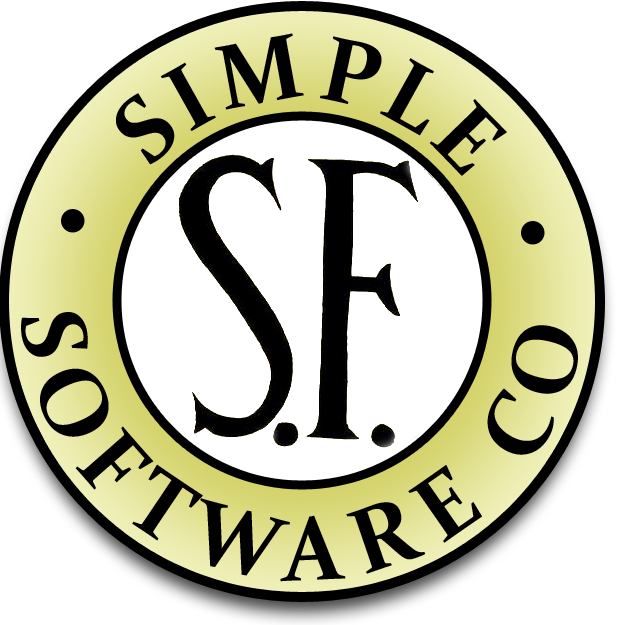
<style>
.page{position:relative;width:625px;height:625px;background:#ffffff}
.page>*{position:absolute;margin:0}
.t1{font:92px "Constantia-Bold";color:#000000}
.t2{font:92px "Constantia-Bold";letter-spacing:0.25em;color:#000000}
</style>
<div class="page">
<p class="t1" style="left:116px;top:33px;width:391px;height:143px;rotate:68deg">SIMPLE</p>
<p class="t2" style="left:21px;top:312px;width:557px;height:270px">SOFTWARE CO</p>
</div>
